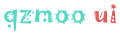
<style>
.page{position:relative;width:120px;height:37px;background:#ffffff}
.page>*{position:absolute;margin:0}
.t1{font:26px "Jokerman-Regular";color:#56d7c7}
.t2{font:26px "Jokerman-Regular";color:#e45a55}
</style>
<div class="page">
<p class="t1" style="left:4px;top:3px;width:113px;height:28px">qzmoo <span class="t2">ui</span></p>
</div>
